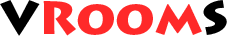
<style>
.page{position:relative;width:229px;height:36px;background:#ffffff}
.page>*{position:absolute;margin:0}
.t1{font:48px "LithosPro-Black";color:#ff2929}
.t2{font:48px "LithosPro-Black";color:#000000}
</style>
<div class="page">
<p class="t1" style="left:0px;top:0px;width:227px;height:36px"><span class="t2">V</span>Room<span class="t2">S</span></p>
</div>
